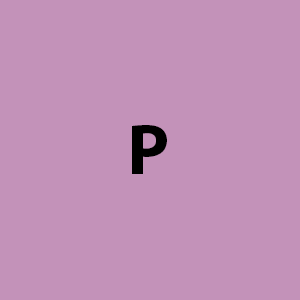
<style>
.page{position:relative;width:300px;height:300px;background:#c392b9}
.page>*{position:absolute;margin:0}
.t1{font:72px "MyriadPro-Bold";color:#000000}
</style>
<div class="page">
<p class="t1" style="left:132px;top:125px;width:35px;height:49px">P</p>
</div>
